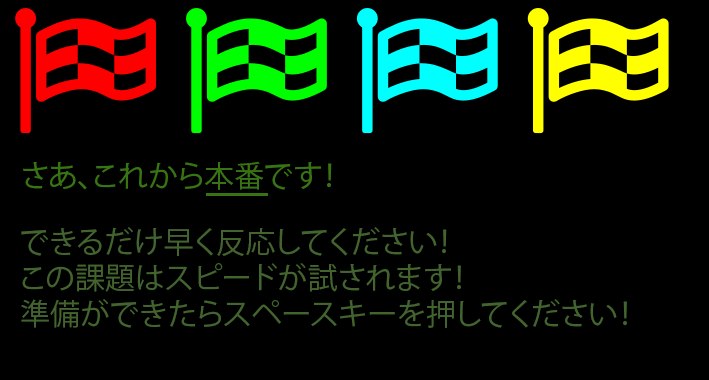
<style>
.page{position:relative;width:709px;height:380px;background:#000000}
.page>*{position:absolute;margin:0}
.t1{font:30px "KozGoPr6N-Regular";color:#387414}
.t2{font:30px "KozGoPr6N-Regular";color:#43632f}
</style>
<div class="page">
<p class="t1" style="left:23px;top:162px;width:309px;height:28px">さあ、これから本番です！</p>
<p class="t2" style="left:21px;top:227px;width:606px;height:101px">できるだけ早く反応してください！<br>この課題はスピードが試されます！<br>準備ができたらスペースキーを押してください！</p>
</div>
